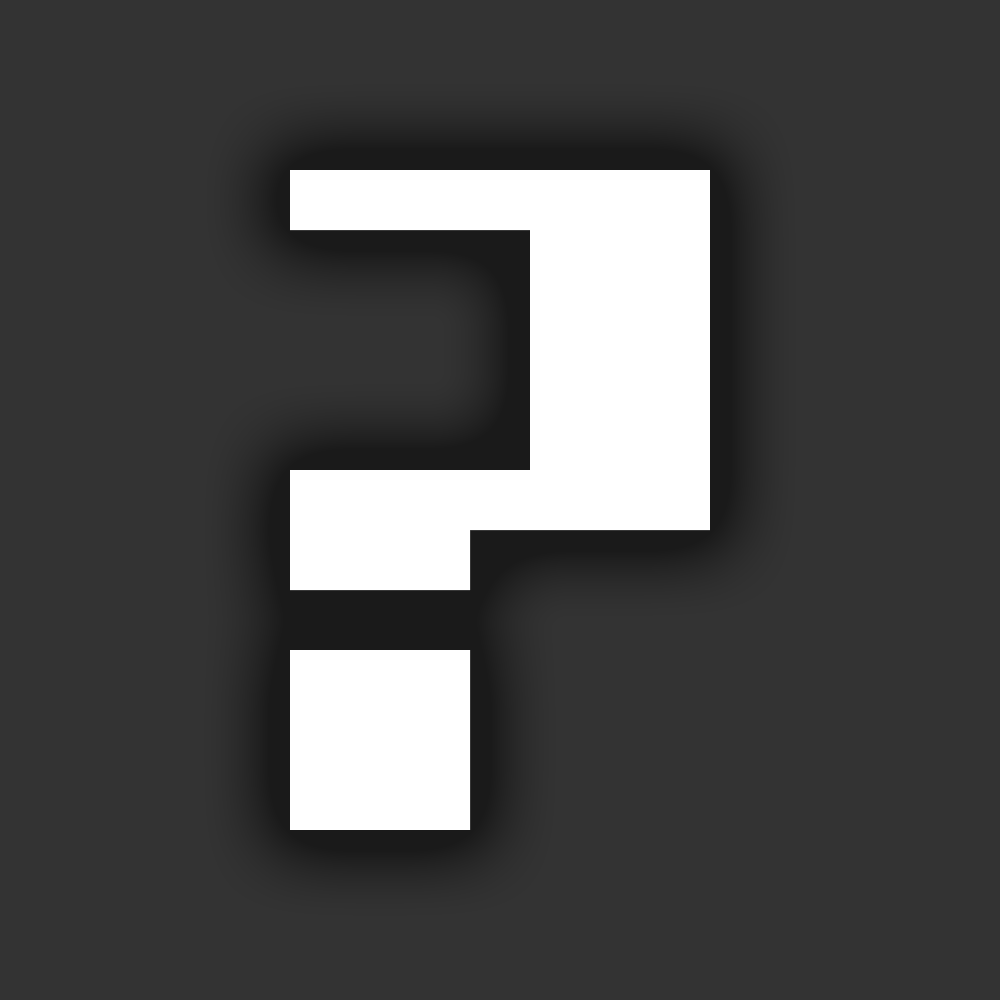
<style>
.page{position:relative;width:1000px;height:1000px;background:#333333}
.page>*{position:absolute;margin:0}
.t1{font:1200px "RETURNTOCASTLE";letter-spacing:-0.02em;color:#ffffff}
</style>
<div class="page">
<p class="t1" style="left:290px;top:170px;width:420px;height:660px">?</p>
</div>
